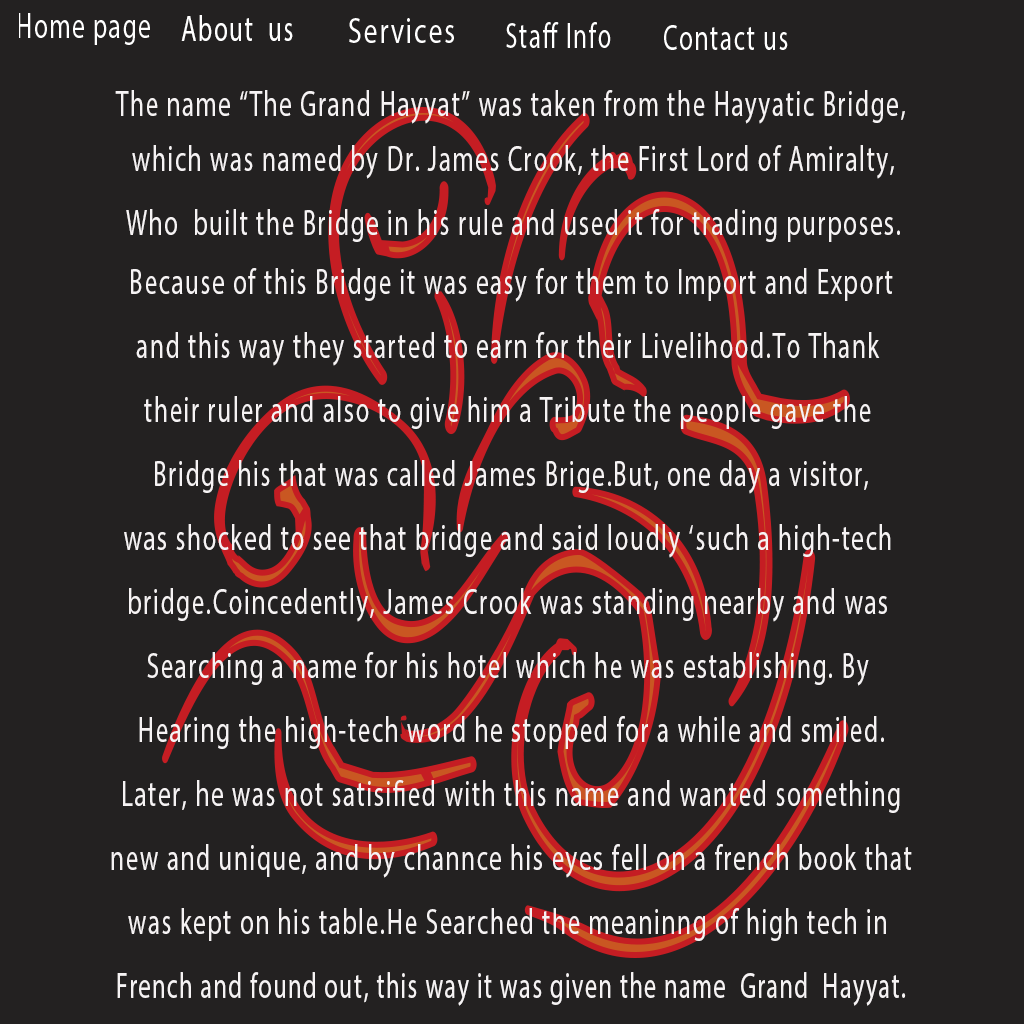
<style>
.page{position:relative;width:1024px;height:1024px;background:#232121}
.page>*{position:absolute;margin:0}
.t1{font:36px "MyriadPro-Regular";letter-spacing:0.06em;color:#ffffff;scale:0.7 1}
.t2{font:36px "MyriadPro-Regular";letter-spacing:0.06em;color:#f6f3f4;scale:0.7 1}
.t3{font:36px/16px "MyriadPro-Regular";letter-spacing:0.06em;color:#f6f3f4;scale:0.7 1}
.t4{font:36px/16px "MyriadPro-Regular";letter-spacing:0.06em;color:#f6f3f4;scale:0.67 1}
</style>
<div class="page">
<p class="t1" style="left:181px;top:15px;width:112px;height:26px">About  us</p>
<p class="t2" style="left:115px;top:90px;width:790px;height:34px">The name “The Grand Hayyat” was taken from the Hayyatic Bridge,</p>
<p class="t3" style="left:126px;top:145px;width:774px;height:97px;text-align:center">which was named by Dr. James Crook, the First Lord of Amiralty,<br><br><br><br>Who  built the Bridge in his rule and used it for trading purposes.</p>
<p class="t3" style="left:111px;top:268px;width:801px;height:738px;text-align:center">Because of this Bridge it was easy for them to Import and Export<br><br><br><br>and this way they started to earn for their Livelihood.To Thank <br><br><br><br>their ruler and also to give him a Tribute the people gave the <br><br><br><br>Bridge his that was called James Brige.But, one day a visitor,<br><br><br><br>was shocked to see that bridge and said loudly ‘such a high-tech <br><br><br><br>bridge.Coincedently, James Crook was standing nearby and was <br><br><br><br>Searching a name for his hotel which he was establishing. By <br><br><br><br>Hearing the high-tech word he stopped for a while and smiled.<br><br><br><br>Later, he was not satisified with this name and wanted something<br><br><br><br>new and unique, and by channce his eyes fell on a french book that<br><br> <br><br>was kept on his table.He Searched the meaninng of high tech in <br><br><br><br><span class="t4">French and found out, this way it was given the name  Grand  Hayyat.</span></p>
</div>
